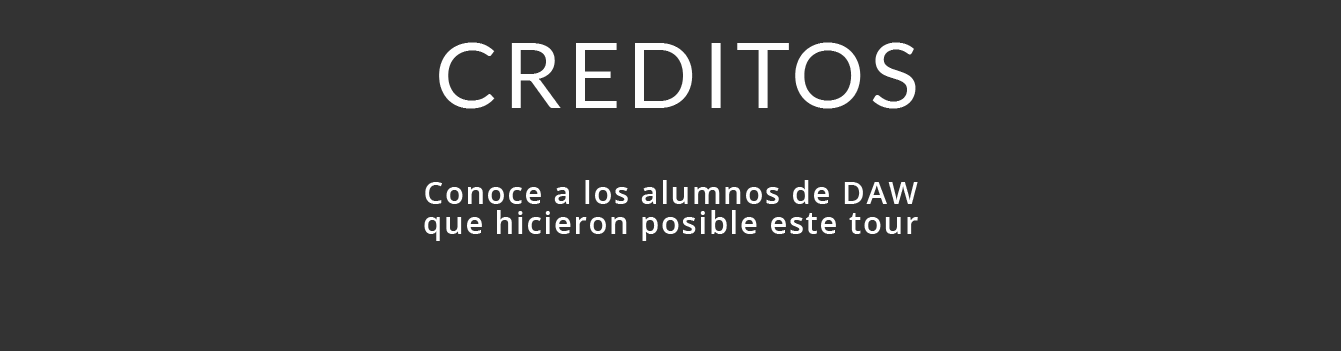
<style>
.page{position:relative;width:1341px;height:351px;background:#333333}
.page>*{position:absolute;margin:0}
.t1{font:92px "Lato-Regular";letter-spacing:0.06em;color:#ffffff}
.t2{font:30.7px/30.7px "OpenSans-Semibold";letter-spacing:0.06em;color:#ffffff}
</style>
<div class="page">
<p class="t1" style="left:439px;top:42px;width:477px;height:67px">CREDITOS</p>
<p class="t2" style="left:424px;top:180px;width:494px;height:61px;text-align:center">Conoce a los alumnos de DAW<br>que hicieron posible este tour</p>
</div>
